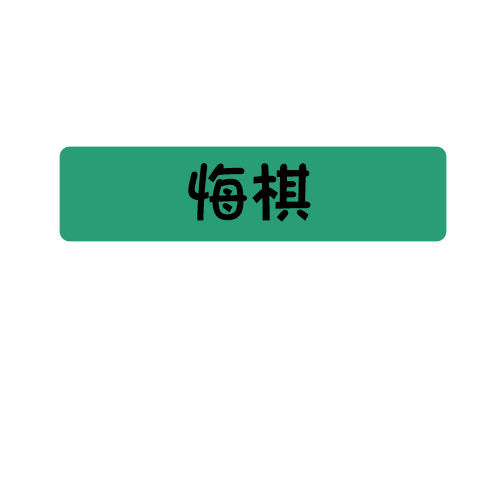
<style>
.page{position:relative;width:500px;height:500px;background:#ffffff}
.page>*{position:absolute;margin:0}
.t1{font:64px "DFFangYuanW7";color:#000000}
</style>
<div class="page">
<p class="t1" style="left:188px;top:163px;width:123px;height:59px">悔棋</p>
</div>
